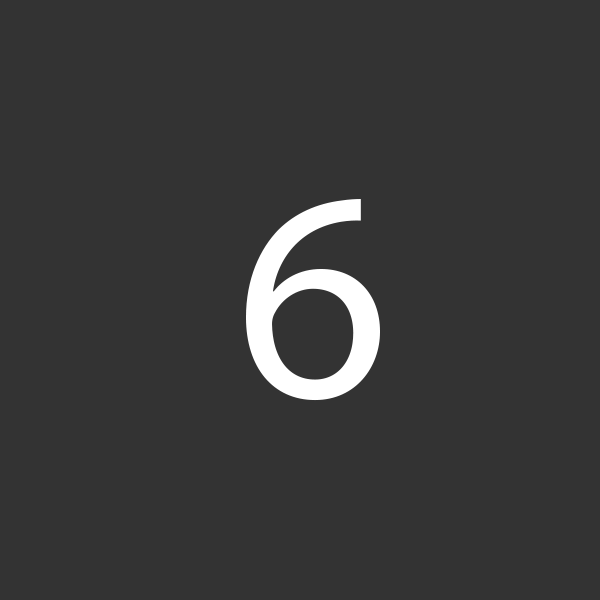
<style>
.page{position:relative;width:600px;height:600px;background:#333333}
.page>*{position:absolute;margin:0}
.t1{font:300px "MyriadPro-Regular";color:#ffffff}
</style>
<div class="page">
<p class="t1" style="left:246px;top:199px;width:134px;height:202px">6</p>
</div>
